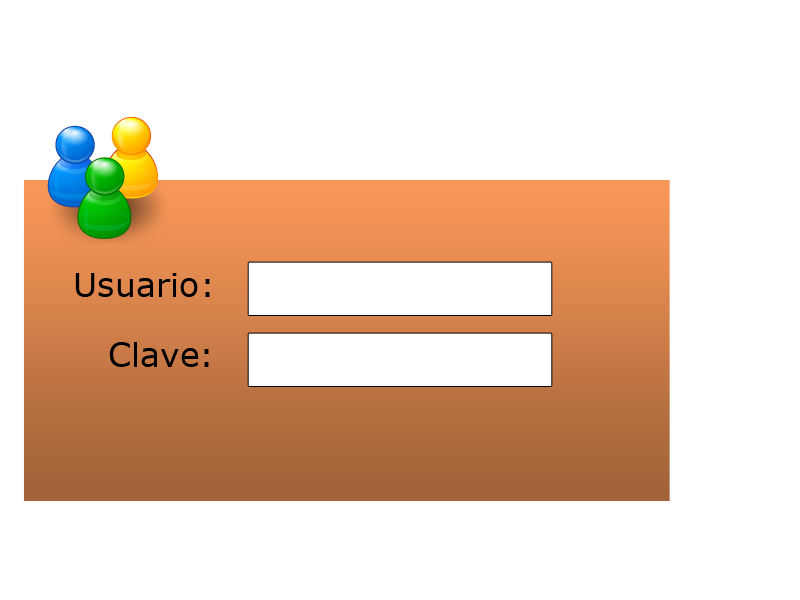
<style>
.page{position:relative;width:800px;height:600px;background:#ffffff}
.page>*{position:absolute;margin:0}
.t1{font:33.4px "Verdana";color:#000000}
</style>
<div class="page">
<p class="t1" style="left:75px;top:273px;width:135px;height:24px">Usuario:</p>
<p class="t1" style="left:109px;top:342px;width:100px;height:25px">Clave:</p>
</div>
